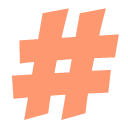
<style>
.page{position:relative;width:128px;height:128px;background:#ffffff}
.page>*{position:absolute;margin:0}
.t1{font:154px "BadaBoomBB";color:#fe9871}
</style>
<div class="page">
<p class="t1" style="left:12px;top:8px;width:107px;height:112px">#</p>
</div>
